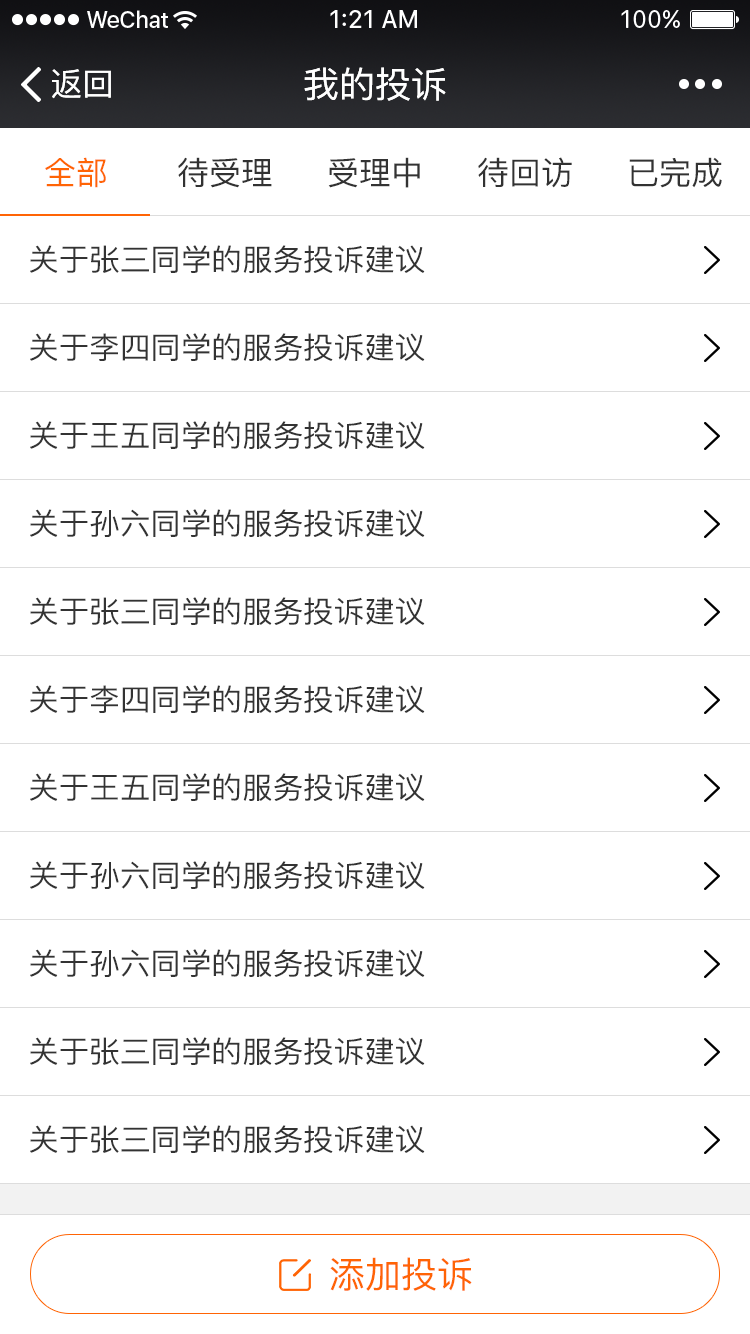
<style>
.page{position:relative;width:750px;height:1334px;background:#ffffff}
.page>*{position:absolute;margin:0}
.t1{font:32px "PingFang-SC-Medium";color:#ffffff}
.t2{font:36px "PingFang-SC-Medium";color:#ffffff}
.t3{font:32px "PingFang-SC-Medium";color:#ff6405}
.t4{font:32px "PingFang-SC-Medium";color:#323232}
.t5{font:32px "PingFang-SC-Medium";color:#333333}
.t6{font:30px "PingFang-SC-Medium";color:#333333}
.t7{font:36px "PingFang-SC-Medium";color:#ff6405}
</style>
<div class="page">
<p class="t1" style="left:52px;top:69px;width:59px;height:30px">返回</p>
<p class="t2" style="left:304px;top:67px;width:142px;height:34px">我的投诉</p>
<p class="t3" style="left:45px;top:157px;width:61px;height:31px">全部</p>
<p class="t4" style="left:178px;top:157px;width:94px;height:31px">待受理</p>
<p class="t5" style="left:328px;top:157px;width:92px;height:31px">受理中</p>
<p class="t4" style="left:478px;top:157px;width:94px;height:31px">待回访</p>
<p class="t4" style="left:629px;top:157px;width:93px;height:31px">已完成</p>
<p class="t6" style="left:30px;top:245px;width:395px;height:28px">关于张三同学的服务投诉建议</p>
<p class="t6" style="left:30px;top:333px;width:395px;height:28px">关于李四同学的服务投诉建议</p>
<p class="t6" style="left:30px;top:421px;width:395px;height:28px">关于王五同学的服务投诉建议</p>
<p class="t6" style="left:30px;top:509px;width:395px;height:28px">关于孙六同学的服务投诉建议</p>
<p class="t6" style="left:30px;top:597px;width:395px;height:28px">关于张三同学的服务投诉建议</p>
<p class="t6" style="left:30px;top:685px;width:395px;height:28px">关于李四同学的服务投诉建议</p>
<p class="t6" style="left:30px;top:773px;width:395px;height:28px">关于王五同学的服务投诉建议</p>
<p class="t6" style="left:30px;top:861px;width:395px;height:28px">关于孙六同学的服务投诉建议</p>
<p class="t6" style="left:30px;top:949px;width:395px;height:28px">关于孙六同学的服务投诉建议</p>
<p class="t6" style="left:30px;top:1037px;width:395px;height:28px">关于张三同学的服务投诉建议</p>
<p class="t6" style="left:30px;top:1125px;width:395px;height:28px">关于张三同学的服务投诉建议</p>
<p class="t7" style="left:330px;top:1257px;width:142px;height:34px">添加投诉</p>
</div>
